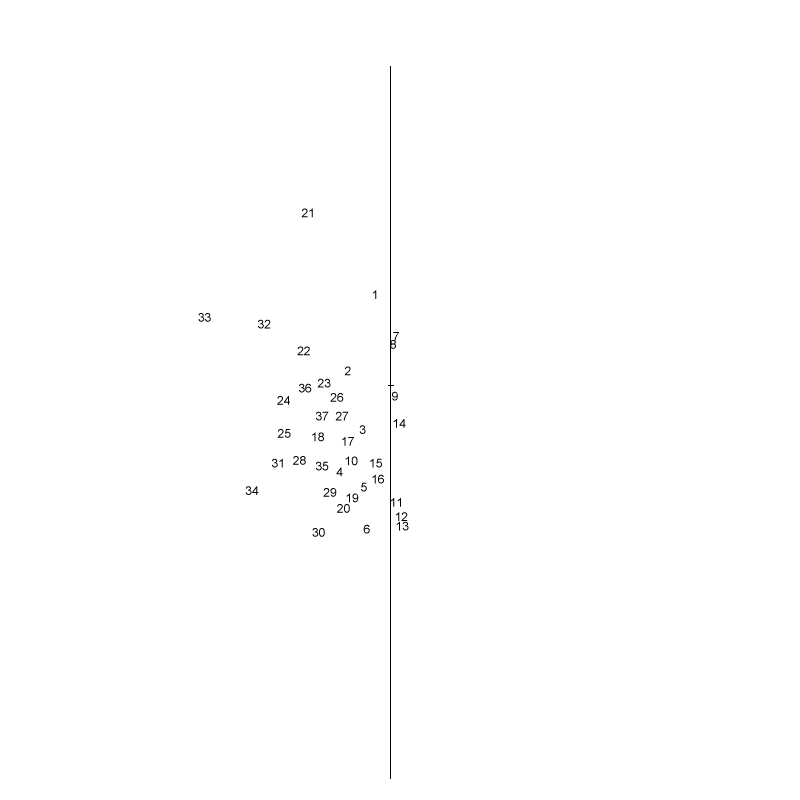
<style>
.page{position:relative;width:800px;height:800px;background:#ffffff}
.page>*{position:absolute;margin:0}
.t1{font:12px "ArialMT";color:#000000}
.t2{font:12px "ArialMT"}
</style>
<div class="page">
<p class="t1" style="left:301px;top:208px;width:12px;height:10px">21</p>
<p class="t1" style="left:373px;top:290px;width:4px;height:9px">1</p>
<p class="t1" style="left:198px;top:313px;width:13px;height:9px">33</p>
<p class="t1" style="left:258px;top:319px;width:13px;height:10px">32</p>
<p class="t1" style="left:390px;top:340px;width:6px;height:9px">8</p>
<p class="t1" style="left:393px;top:332px;width:6px;height:9px">7</p>
<p class="t1" style="left:297px;top:346px;width:13px;height:10px">22</p>
<p class="t1" style="left:344px;top:366px;width:7px;height:10px">2</p>
<p class="t1" style="left:299px;top:383px;width:13px;height:10px">36</p>
<p class="t1" style="left:317px;top:378px;width:14px;height:10px">23</p>
<p class="t1" style="left:277px;top:396px;width:13px;height:9px">24</p>
<p class="t1" style="left:330px;top:393px;width:14px;height:9px">26</p>
<p class="t1" style="left:392px;top:391px;width:6px;height:10px">9</p>
<p class="t2" style="left:316px;top:411px;width:13px;height:10px">37</p>
<p class="t2" style="left:335px;top:411px;width:14px;height:10px">27</p>
<p class="t1" style="left:359px;top:425px;width:7px;height:9px">3</p>
<p class="t1" style="left:393px;top:419px;width:13px;height:9px">14</p>
<p class="t1" style="left:277px;top:429px;width:14px;height:9px">25</p>
<p class="t1" style="left:312px;top:432px;width:12px;height:10px">18</p>
<p class="t1" style="left:342px;top:437px;width:12px;height:9px">17</p>
<p class="t1" style="left:272px;top:458px;width:11px;height:10px">31</p>
<p class="t1" style="left:293px;top:456px;width:13px;height:9px">28</p>
<p class="t1" style="left:316px;top:461px;width:13px;height:10px">35</p>
<p class="t1" style="left:345px;top:456px;width:13px;height:10px">10</p>
<p class="t1" style="left:370px;top:458px;width:12px;height:10px">15</p>
<p class="t2" style="left:336px;top:467px;width:7px;height:10px">4</p>
<p class="t1" style="left:245px;top:486px;width:14px;height:9px">34</p>
<p class="t2" style="left:361px;top:482px;width:6px;height:10px">5</p>
<p class="t1" style="left:372px;top:474px;width:12px;height:10px">16</p>
<p class="t1" style="left:323px;top:488px;width:14px;height:9px">29</p>
<p class="t1" style="left:346px;top:493px;width:13px;height:10px">19</p>
<p class="t1" style="left:337px;top:504px;width:13px;height:9px">20</p>
<p class="t1" style="left:391px;top:498px;width:10px;height:9px">11</p>
<p class="t1" style="left:396px;top:512px;width:12px;height:9px">12</p>
<p class="t1" style="left:396px;top:521px;width:13px;height:10px">13</p>
<p class="t1" style="left:312px;top:528px;width:13px;height:9px">30</p>
<p class="t2" style="left:363px;top:524px;width:7px;height:10px">6</p>
</div>
